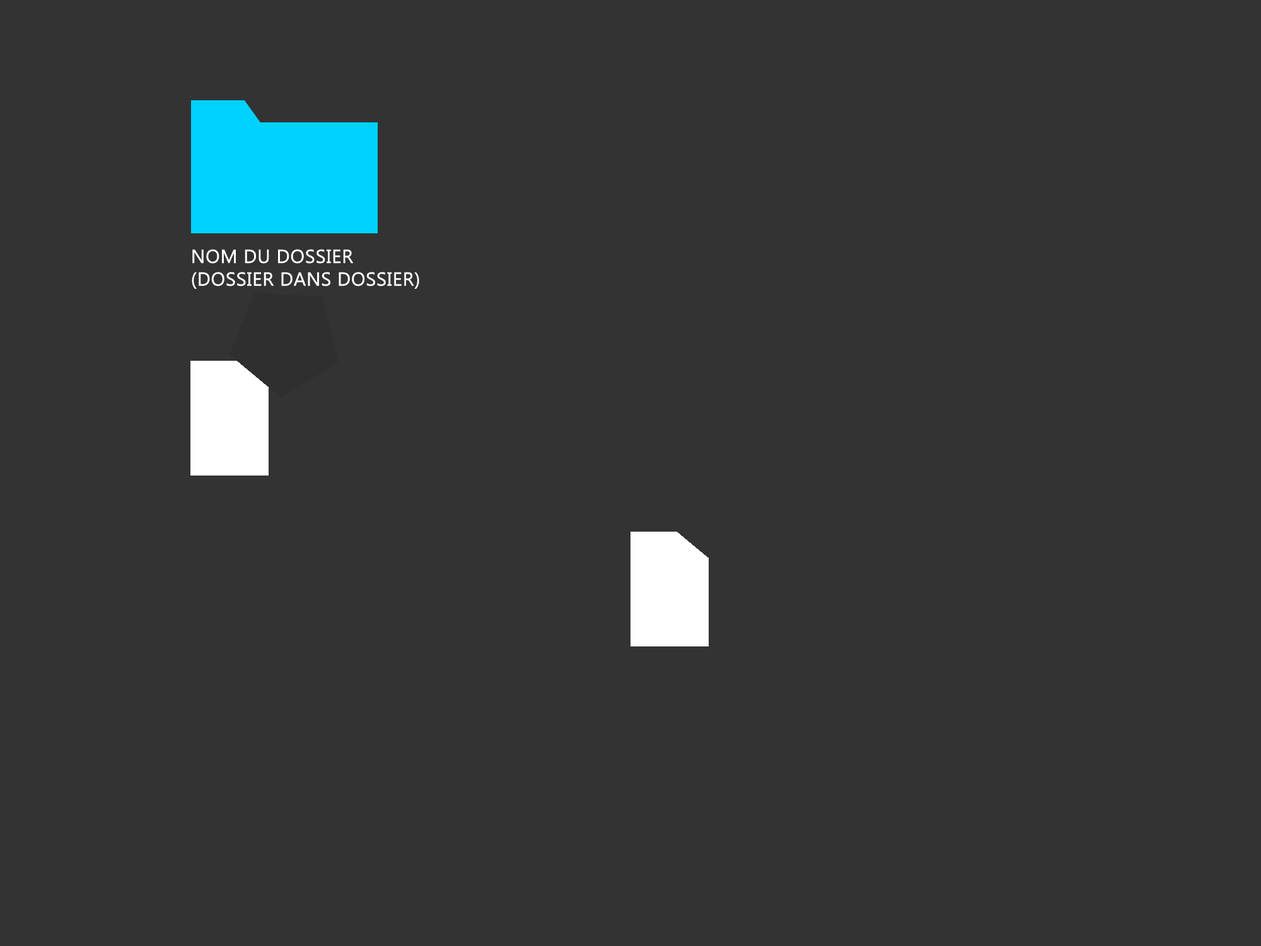
<style>
.page{position:relative;width:1261px;height:946px;background:#333333}
.page>*{position:absolute;margin:0}
.t1{font:18.9px/22.7px "MicrosoftTaiLe";color:#ffffff;text-transform:uppercase;font-weight:bold}
</style>
<div class="page">
<p class="t1" style="left:192px;top:249px;width:227px;height:40px">Nom du dossier<br>(dossier dans dossier)</p>
</div>
